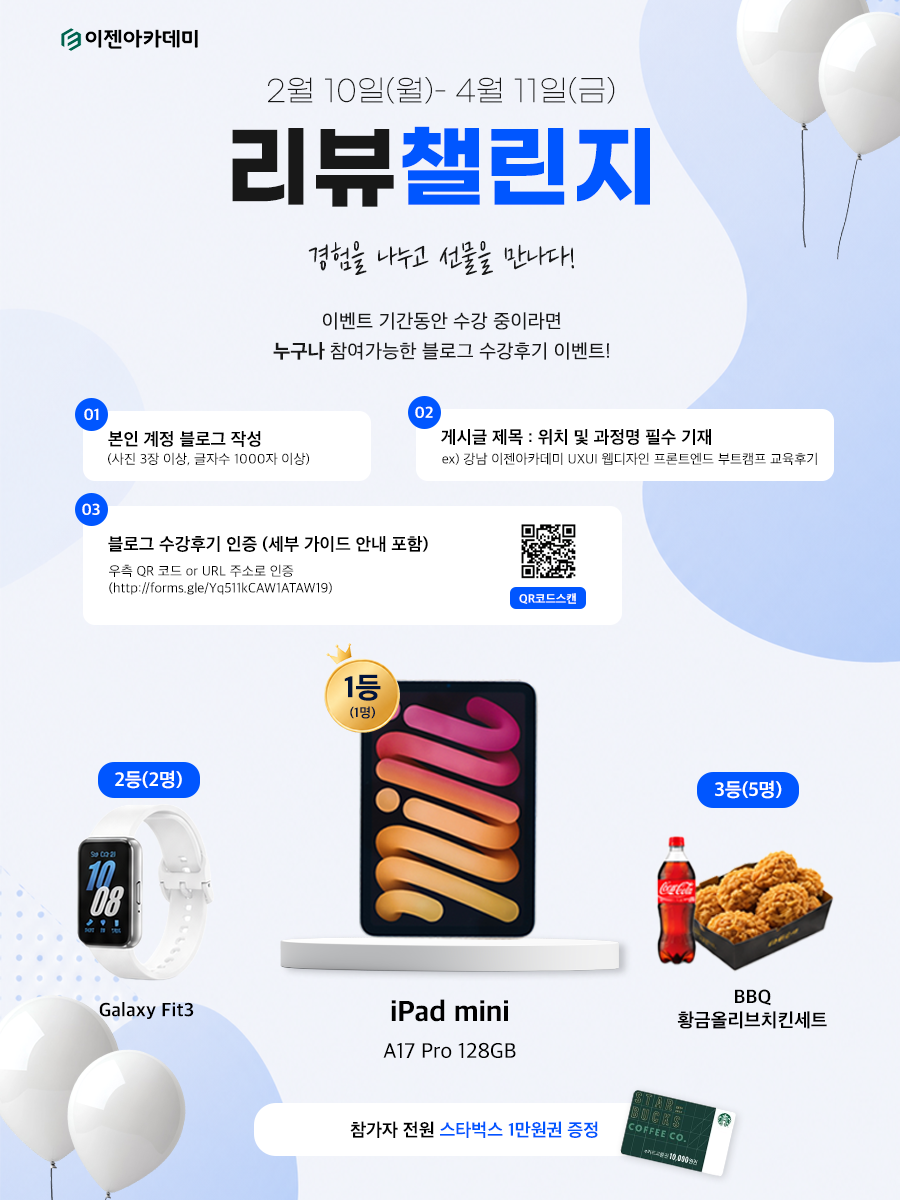
<style>
.page{position:relative;width:900px;height:1200px}
.page>*{position:absolute;margin:0}
.t1{font:30px "GmarketSansTTFLight";color:#181818}
.t2{font:90px "GmarketSansBold";color:#0056ff}
.t3{font:90px "GmarketSansBold";color:#181818}
.t4{font:35px "Cafe24Shiningstar-OTF";color:#181818}
.t5{font:20px/30px "AppleSDGothicNeo-Medium";color:#181818}
.t6{font:20px/30px "AppleSDGothicNeo-ExtraBold";color:#181818}
.t7{font:16.1px "AppleSDGothicNeo-Bold";color:#ffffff}
.t8{font:18px "AppleSDGothicNeo-Bold";color:#000000}
.t9{font:14px "AppleSDGothicNeo-Regular";color:#000000}
.t10{font:12px "AppleSDGothicNeo-Bold";color:#ffffff}
.t11{font:13.7px/19px "AppleSDGothicNeo-Bold";color:#00143c}
.t12{font:30.4px/22.8px "AppleSDGothicNeo-ExtraBold";color:#00143c}
.t13{font:19.7px "AppleSDGothicNeo-Bold";color:#ffffff}
.t14{font:19.3px "AppleSDGothicNeo-Bold";color:#000000}
.t15{font:21.9px/36.5px "AppleSDGothicNeo-Medium";color:#000000}
.t16{font:29.3px/36.5px "AppleSDGothicNeo-ExtraBold";color:#000000}
.t17{font:18.4px "AppleSDGothicNeo-Bold";color:#0056ff}
.t18{font:18.4px "AppleSDGothicNeo-Bold";color:#000000}
</style>
<div class="page">
<p class="t1" style="left:268px;top:77px;width:347px;height:27px">2월 10일(월)- 4월 11일(금)</p>
<p class="t2" style="left:232px;top:126px;width:418px;height:81px"><span class="t3">리뷰</span>챌린지</p>
<p class="t4" style="left:308px;top:241px;width:266px;height:34px">경험을 나누고 선물을 만나다!</p>
<p class="t5" style="left:273px;top:312px;width:336px;height:48px;text-align:center">이벤트 기간동안 수강 중이라면<br><span class="t6">누구나 </span>참여가능한 블로그 수강후기 이벤트!</p>
<p class="t7" style="left:84px;top:408px;width:15px;height:12px">01</p>
<p class="t7" style="left:415px;top:406px;width:18px;height:12px">02</p>
<p class="t8" style="left:108px;top:431px;width:153px;height:16px">본인 계정 블로그 작성</p>
<p class="t8" style="left:441px;top:429px;width:270px;height:16px">게시글 제목 : 위치 및 과정명 필수 기재</p>
<p class="t9" style="left:108px;top:452px;width:201px;height:14px">(사진 3장 이상, 글자수 1000자 이상)</p>
<p class="t9" style="left:442px;top:452px;width:375px;height:13px">ex) 강남 이젠아카데미 UXUI 웹디자인 프론트엔드 부트캠프 교육후기</p>
<p class="t7" style="left:82px;top:503px;width:18px;height:12px">03</p>
<p class="t8" style="left:108px;top:536px;width:320px;height:16px">블로그 수강후기 인증 (세부 가이드 안내 포함)</p>
<p class="t9" style="left:109px;top:564px;width:223px;height:31px">우측 QR 코드 or URL 주소로 인증<br>(http://forms.gle/Yq511kCAW1ATAW19)</p>
<p class="t10" style="left:519px;top:593px;width:57px;height:11px">QR코드스캔</p>
<p class="t11" style="left:344px;top:674px;width:37px;height:45px;text-align:center"><span class="t12">1등<br></span>(1명)</p>
<p class="t13" style="left:115px;top:770px;width:67px;height:19px">2등(2명)</p>
<p class="t13" style="left:715px;top:780px;width:67px;height:19px">3등(5명)</p>
<p class="t14" style="left:677px;top:989px;width:150px;height:40px;text-align:center">BBQ<br>황금올리브치킨세트</p>
<p class="t15" style="left:383px;top:999px;width:133px;height:59px;text-align:center"><span class="t16">iPad mini<br></span>A17 Pro 128GB</p>
<p class="t14" style="left:99px;top:1002px;width:95px;height:17px">Galaxy Fit3</p>
<p class="t17" style="left:350px;top:1121px;width:248px;height:17px"><span class="t18">참가자 전원 </span>스타벅스 1만원권 증정</p>
</div>
